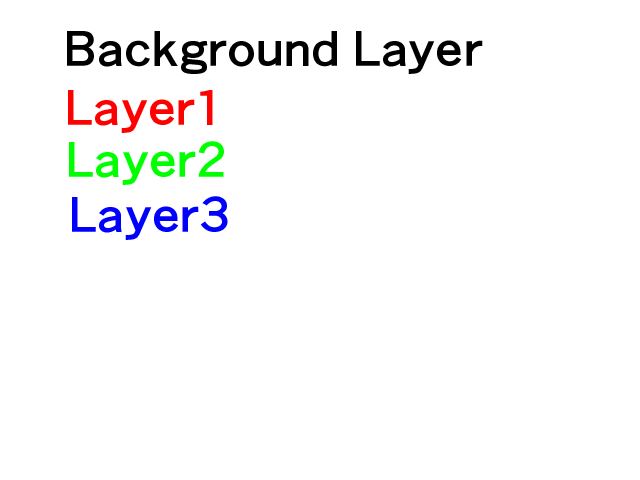
<style>
.page{position:relative;width:640px;height:480px;background:#ffffff}
.page>*{position:absolute;margin:0}
.t1{font:49px "IwaAntStd-Bd";color:#ff0000}
.t2{font:49px "IwaAntStd-Bd";color:#00ff00}
.t3{font:49px "IwaAntStd-Bd";color:#0000ff}
</style>
<div class="page">
<p class="t1" style="left:68px;top:90px;width:145px;height:43px">Layer1</p>
<p class="t2" style="left:69px;top:141px;width:155px;height:44px">Layer2</p>
<p class="t3" style="left:72px;top:196px;width:156px;height:44px">Layer3</p>
</div>
